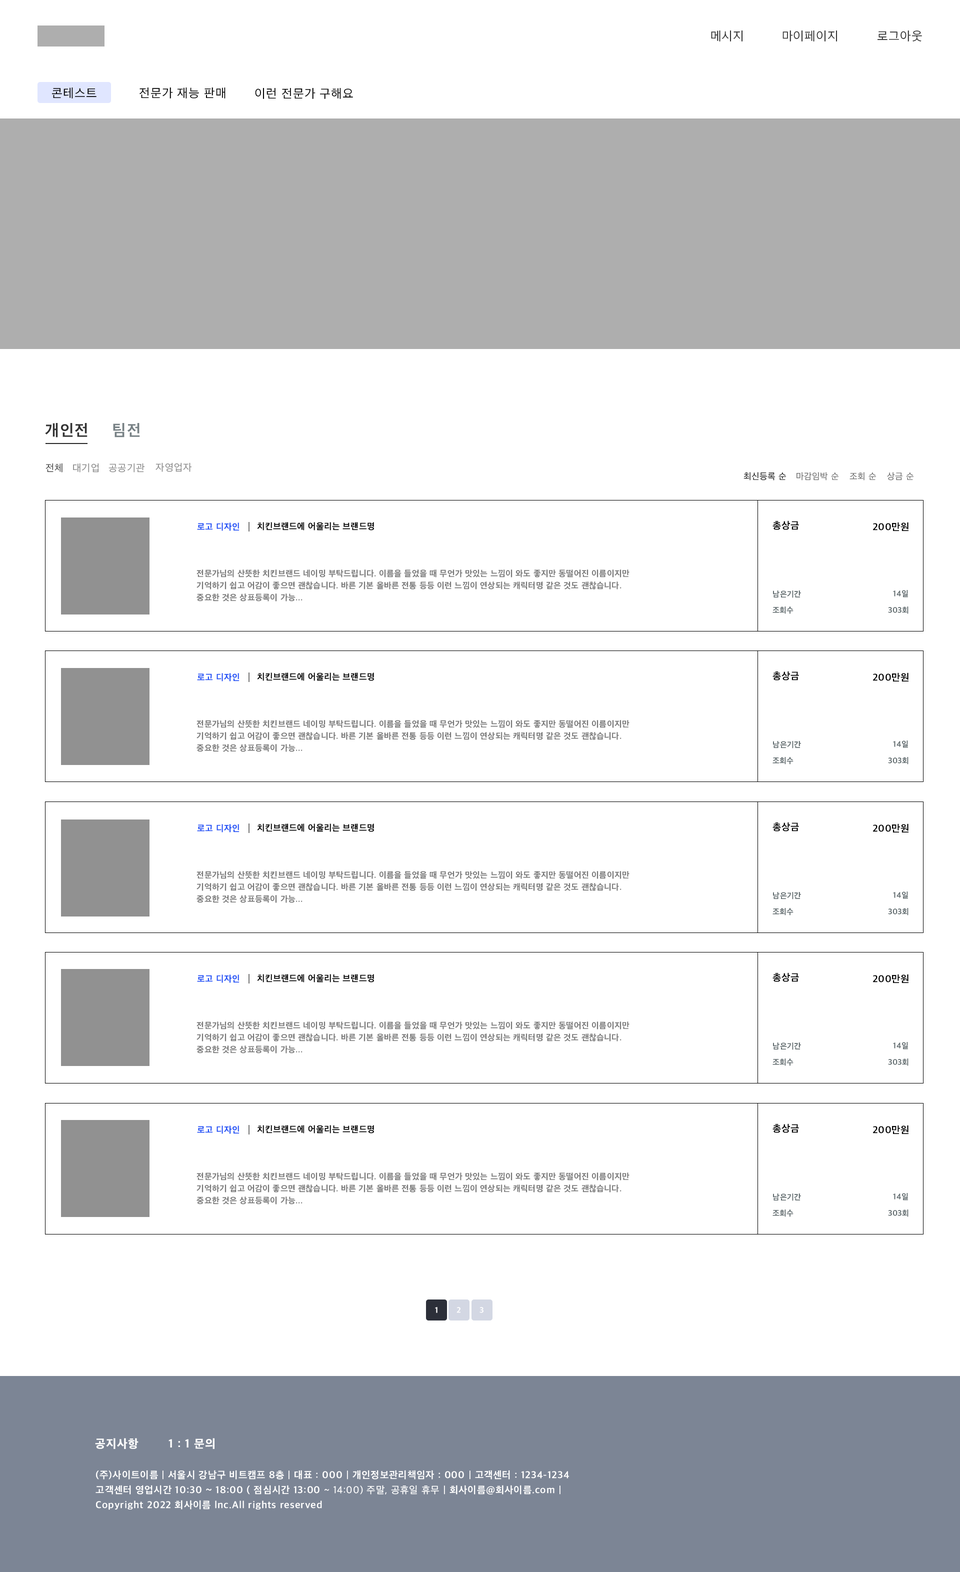
<style>
.page{position:relative;width:960px;height:1572px;background:#ffffff}
.page>*{position:absolute;margin:0}
.t1{font:12.5px "AppleSDGothicNeo-Regular";letter-spacing:0.05em;color:#333333}
.t2{font:12.5px "AppleSDGothicNeo-Regular";letter-spacing:0.05em;color:#000000}
.t3{font:16px "AppleSDGothicNeo-Bold";letter-spacing:0.05em;color:#333333}
.t4{font:16px "AppleSDGothicNeo-Bold";letter-spacing:0.05em;color:#768084}
.t5{font:10px "AppleSDGothicNeo-Regular";letter-spacing:0.05em;color:#515151}
.t6{font:10px "AppleSDGothicNeo-Regular";letter-spacing:0.05em;color:#8e8e8e}
.t7{font:10px "AppleSDGothicNeo-Regular";letter-spacing:0.05em;color:#909090}
.t8{font:9px "AppleSDGothicNeo-Regular";letter-spacing:0.03em;color:#212121}
.t9{font:9px "AppleSDGothicNeo-Regular";letter-spacing:0.03em;color:#747474}
.t10{font:10px "AppleSDGothicNeo-Bold";letter-spacing:0.03em;color:#000000}
.t11{font:9px "AppleSDGothicNeo-Bold";letter-spacing:0.03em;color:#2152f6}
.t12{font:9px "AppleSDGothicNeo-Bold";letter-spacing:0.03em;color:#000000}
.t13{font:8.5px/12px "AppleSDGothicNeo-Bold";letter-spacing:0.03em;color:#777777}
.t14{font:8px "AppleSDGothicNeo-Bold";letter-spacing:0.03em;color:#606b6e}
.t15{font:8px "AppleSDGothicNeo-Bold";letter-spacing:0.03em;color:#ffffff}
.t16{font:12px "AppleSDGothicNeo-ExtraBold";letter-spacing:0.05em;color:#ffffff}
.t17{font:10px/15px "AppleSDGothicNeo-Bold";letter-spacing:0.05em;color:#ffffff}
.t18{font:10px/15px "AppleSDGothicNeo-Regular";letter-spacing:0.05em;color:#ffffff}
</style>
<div class="page">
<p class="t1" style="left:711px;top:30px;width:31px;height:12px">메시지</p>
<p class="t1" style="left:782px;top:30px;width:55px;height:12px">마이페이지</p>
<p class="t1" style="left:878px;top:30px;width:44px;height:12px">로그아웃</p>
<p class="t2" style="left:52px;top:88px;width:44px;height:10px">콘테스트</p>
<p class="t2" style="left:139px;top:88px;width:87px;height:10px">전문가 재능 판매</p>
<p class="t2" style="left:255px;top:88px;width:98px;height:11px">이런 전문가 구해요</p>
<p class="t3" style="left:45px;top:423px;width:43px;height:15px">개인전</p>
<p class="t4" style="left:113px;top:423px;width:27px;height:15px">팀전</p>
<p class="t5" style="left:46px;top:463px;width:16px;height:9px">전체</p>
<p class="t6" style="left:73px;top:463px;width:26px;height:9px">대기업</p>
<p class="t7" style="left:108px;top:463px;width:36px;height:9px">공공기관</p>
<p class="t7" style="left:156px;top:462px;width:36px;height:10px">자영업자</p>
<p class="t8" style="left:744px;top:472px;width:42px;height:8px">최신등록 순</p>
<p class="t9" style="left:796px;top:472px;width:42px;height:8px">마감임박 순</p>
<p class="t9" style="left:850px;top:472px;width:26px;height:8px">조회 순</p>
<p class="t9" style="left:887px;top:472px;width:27px;height:8px">상금 순</p>
<p class="t10" style="left:772px;top:520px;width:27px;height:10px">총상금</p>
<p class="t11" style="left:197px;top:522px;width:43px;height:9px">로고 디자인</p>
<p class="t12" style="left:257px;top:522px;width:117px;height:8px">치킨브랜드에 어울리는 브랜드명</p>
<p class="t10" style="left:873px;top:522px;width:35px;height:9px">200만원</p>
<p class="t13" style="left:196px;top:570px;width:434px;height:32px">전문가님의 산뜻한 치킨브랜드 네이밍 부탁드립니다. 이름을 들었을 때 무언가 맛있는 느낌이 와도 좋지만 동떨어진 이름이지만<br>기억하기 쉽고 어감이 좋으면 괜찮습니다. 바른 기본 올바른 전통 등등 이런 느낌이 연상되는 캐릭터명 같은 것도 괜찮습니다.<br>중요한 것은 상표등록이 가능...</p>
<p class="t14" style="left:773px;top:590px;width:28px;height:8px">남은기간</p>
<p class="t14" style="left:893px;top:590px;width:15px;height:8px">14일</p>
<p class="t14" style="left:772px;top:606px;width:22px;height:8px">조회수</p>
<p class="t14" style="left:888px;top:606px;width:20px;height:8px">303회</p>
<p class="t11" style="left:197px;top:673px;width:43px;height:9px">로고 디자인</p>
<p class="t12" style="left:257px;top:672px;width:117px;height:9px">치킨브랜드에 어울리는 브랜드명</p>
<p class="t10" style="left:772px;top:671px;width:27px;height:9px">총상금</p>
<p class="t10" style="left:873px;top:672px;width:35px;height:10px">200만원</p>
<p class="t13" style="left:196px;top:720px;width:434px;height:32px">전문가님의 산뜻한 치킨브랜드 네이밍 부탁드립니다. 이름을 들었을 때 무언가 맛있는 느낌이 와도 좋지만 동떨어진 이름이지만<br>기억하기 쉽고 어감이 좋으면 괜찮습니다. 바른 기본 올바른 전통 등등 이런 느낌이 연상되는 캐릭터명 같은 것도 괜찮습니다.<br>중요한 것은 상표등록이 가능...</p>
<p class="t14" style="left:773px;top:741px;width:28px;height:7px">남은기간</p>
<p class="t14" style="left:893px;top:740px;width:15px;height:8px">14일</p>
<p class="t14" style="left:772px;top:757px;width:22px;height:7px">조회수</p>
<p class="t14" style="left:888px;top:757px;width:20px;height:7px">303회</p>
<p class="t10" style="left:772px;top:822px;width:27px;height:10px">총상금</p>
<p class="t11" style="left:197px;top:824px;width:43px;height:8px">로고 디자인</p>
<p class="t12" style="left:257px;top:824px;width:117px;height:8px">치킨브랜드에 어울리는 브랜드명</p>
<p class="t10" style="left:873px;top:824px;width:35px;height:8px">200만원</p>
<p class="t13" style="left:196px;top:871px;width:434px;height:32px">전문가님의 산뜻한 치킨브랜드 네이밍 부탁드립니다. 이름을 들었을 때 무언가 맛있는 느낌이 와도 좋지만 동떨어진 이름이지만<br>기억하기 쉽고 어감이 좋으면 괜찮습니다. 바른 기본 올바른 전통 등등 이런 느낌이 연상되는 캐릭터명 같은 것도 괜찮습니다.<br>중요한 것은 상표등록이 가능...</p>
<p class="t14" style="left:773px;top:892px;width:28px;height:8px">남은기간</p>
<p class="t14" style="left:893px;top:892px;width:15px;height:7px">14일</p>
<p class="t14" style="left:772px;top:908px;width:22px;height:8px">조회수</p>
<p class="t14" style="left:888px;top:908px;width:20px;height:8px">303회</p>
<p class="t11" style="left:197px;top:974px;width:43px;height:9px">로고 디자인</p>
<p class="t12" style="left:257px;top:974px;width:117px;height:8px">치킨브랜드에 어울리는 브랜드명</p>
<p class="t10" style="left:772px;top:972px;width:27px;height:10px">총상금</p>
<p class="t10" style="left:873px;top:974px;width:35px;height:9px">200만원</p>
<p class="t13" style="left:196px;top:1022px;width:434px;height:32px">전문가님의 산뜻한 치킨브랜드 네이밍 부탁드립니다. 이름을 들었을 때 무언가 맛있는 느낌이 와도 좋지만 동떨어진 이름이지만<br>기억하기 쉽고 어감이 좋으면 괜찮습니다. 바른 기본 올바른 전통 등등 이런 느낌이 연상되는 캐릭터명 같은 것도 괜찮습니다.<br>중요한 것은 상표등록이 가능...</p>
<p class="t14" style="left:773px;top:1042px;width:28px;height:8px">남은기간</p>
<p class="t14" style="left:893px;top:1042px;width:15px;height:8px">14일</p>
<p class="t14" style="left:772px;top:1058px;width:22px;height:8px">조회수</p>
<p class="t14" style="left:888px;top:1058px;width:20px;height:8px">303회</p>
<p class="t11" style="left:197px;top:1126px;width:43px;height:8px">로고 디자인</p>
<p class="t12" style="left:257px;top:1125px;width:117px;height:9px">치킨브랜드에 어울리는 브랜드명</p>
<p class="t10" style="left:772px;top:1124px;width:27px;height:9px">총상금</p>
<p class="t10" style="left:873px;top:1125px;width:35px;height:9px">200만원</p>
<p class="t13" style="left:196px;top:1172px;width:434px;height:32px">전문가님의 산뜻한 치킨브랜드 네이밍 부탁드립니다. 이름을 들었을 때 무언가 맛있는 느낌이 와도 좋지만 동떨어진 이름이지만<br>기억하기 쉽고 어감이 좋으면 괜찮습니다. 바른 기본 올바른 전통 등등 이런 느낌이 연상되는 캐릭터명 같은 것도 괜찮습니다.<br>중요한 것은 상표등록이 가능...</p>
<p class="t14" style="left:773px;top:1194px;width:28px;height:7px">남은기간</p>
<p class="t14" style="left:893px;top:1193px;width:15px;height:7px">14일</p>
<p class="t14" style="left:772px;top:1210px;width:22px;height:7px">조회수</p>
<p class="t14" style="left:888px;top:1210px;width:20px;height:7px">303회</p>
<p class="t15" style="left:435px;top:1307px;width:3px;height:6px">1</p>
<p class="t15" style="left:456px;top:1307px;width:4px;height:6px">2</p>
<p class="t15" style="left:480px;top:1307px;width:4px;height:6px">3</p>
<p class="t16" style="left:95px;top:1438px;width:43px;height:11px">공지사항</p>
<p class="t16" style="left:168px;top:1438px;width:46px;height:11px">1 : 1 문의</p>
<p class="t17" style="left:96px;top:1470px;width:473px;height:40px">(주)사이트이름 | 서울시 강남구 비트캠프 8층 | 대표 : 000 | 개인정보관리책임자 : 000 | 고객센터 : 1234-1234<br>고객센터 영업시간 10:30 ~ 18:00 ( 점심시간 13:00<span class="t18"> ~ 14:00) 주말, 공휴일 휴무</span> | 회사이름@회사이름.com | <br>Copyright 2022 회사이름 lnc.All rights reserved</p>
</div>
